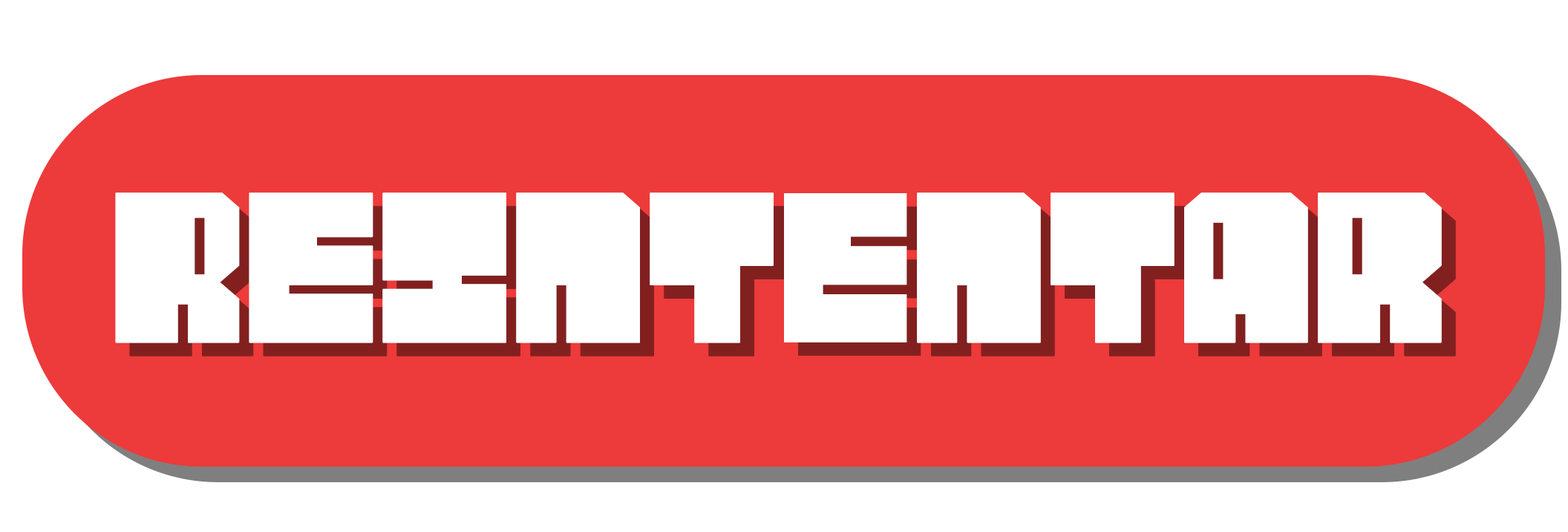
<style>
.page{position:relative;width:1568px;height:532px;background:#ffffff}
.page>*{position:absolute;margin:0}
.t1{font:148.9px "Fruit-Punch";color:#ffffff;font-weight:bold;scale:1.16 1}
</style>
<div class="page">
<p class="t1" style="left:115px;top:192px;width:1327px;height:151px">Reintentar</p>
</div>
